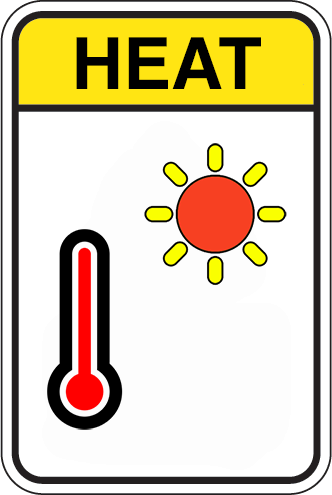
<style>
.page{position:relative;width:332px;height:495px;background:#ffffff}
.page>*{position:absolute;margin:0}
.t1{font:72px "Helvetica-Bold";color:#000000}
</style>
<div class="page">
<p class="t1" style="left:76px;top:37px;width:185px;height:52px">HEAT</p>
</div>
